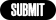
<style>
.page{position:relative;width:56px;height:20px;background:#000000}
.page>*{position:absolute;margin:0}
.t1{font:18.1px "AndersonSupercar";color:#ffffff}
</style>
<div class="page">
<p class="t1" style="left:11px;top:3px;width:34px;height:14px">SUBMIT</p>
</div>
